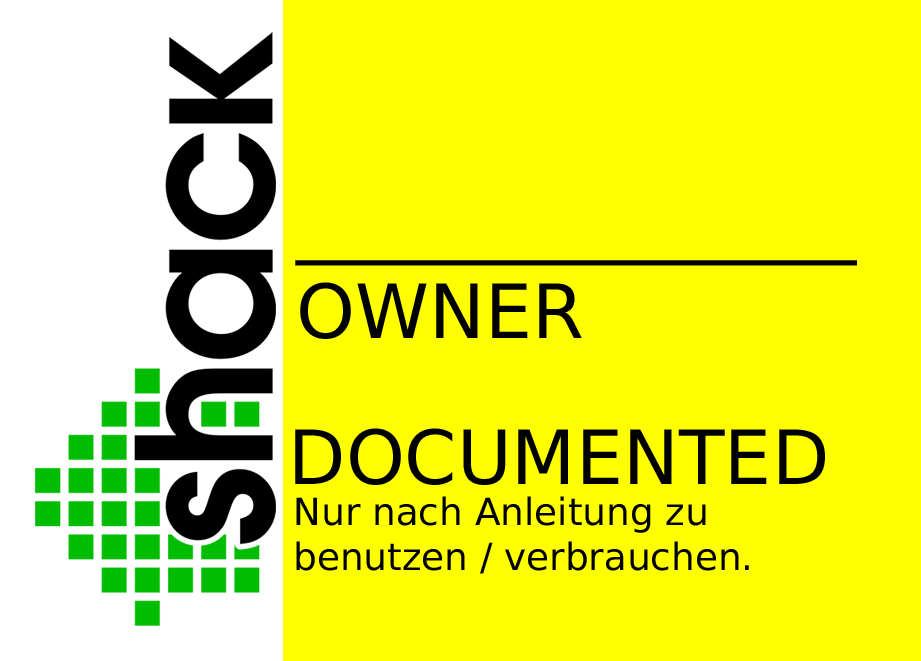
<style>
.page{position:relative;width:921px;height:661px;background:#ffff00}
.page>*{position:absolute;margin:0}
.t1{font:74.7px "PrimaSansBT-Roman";color:#000000}
.t2{font:37.4px "PrimaSansBT-Roman";color:#000000}
</style>
<div class="page">
<p class="t1" style="left:295px;top:260px;width:562px;height:79px">_______________<br>OWNER</p>
<p class="t1" style="left:295px;top:428px;width:530px;height:57px">DOCUMENTED</p>
<p class="t2" style="left:296px;top:496px;width:453px;height:78px">Nur nach Anleitung zu<br>benutzen / verbrauchen.</p>
</div>
